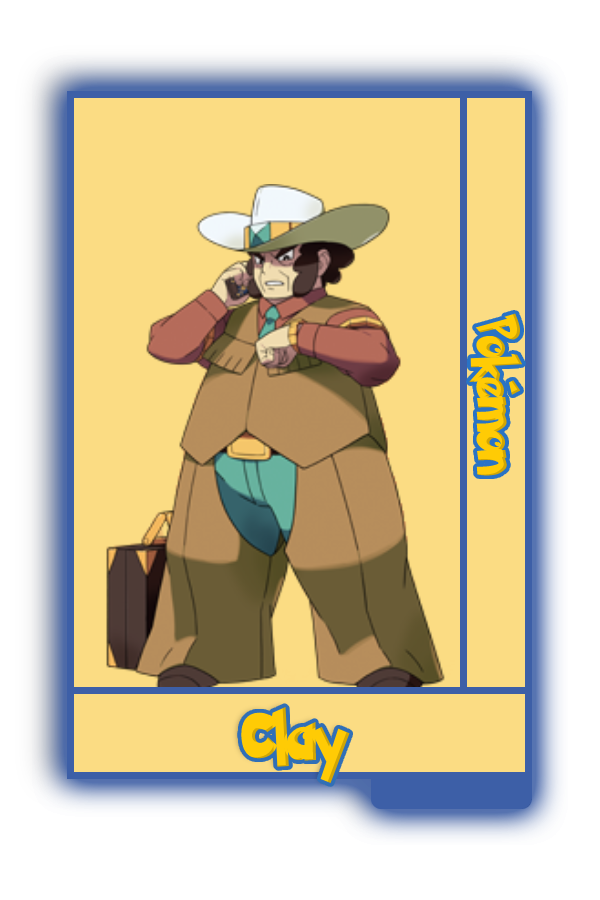
<style>
.page{position:relative;width:600px;height:900px;background:#fbdc83}
.page>*{position:absolute;margin:0}
.t1{font:48.8px "PokemonSolidNormal";color:#ffcb05;scale:0.8 1}
.t2{font:56.6px "PokemonSolidNormal";color:#ffcb05;scale:0.92 1}
</style>
<div class="page">
<p class="t1" style="left:469px;top:313px;width:54px;height:163px;rotate:90deg">Pokémon</p>
<p class="t2" style="left:241px;top:706px;width:109px;height:77px">Clay</p>
</div>
